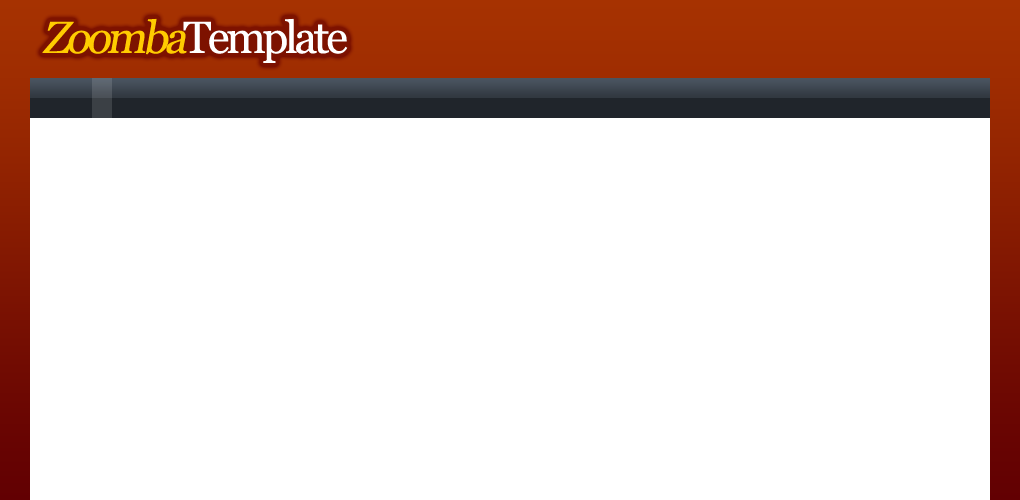
<style>
.page{position:relative;width:1020px;height:500px;background:#ffffff}
.page>*{position:absolute;margin:0}
.t1{font:45px "Georgia";letter-spacing:-0.08em;color:#ffffff}
.t2{font:45px "Georgia";letter-spacing:-0.08em;color:#ffcc00;font-style:italic}
</style>
<div class="page">
<p class="t1" style="left:42px;top:18px;width:306px;height:45px"><span class="t2">Zoomba</span>Template</p>
</div>
